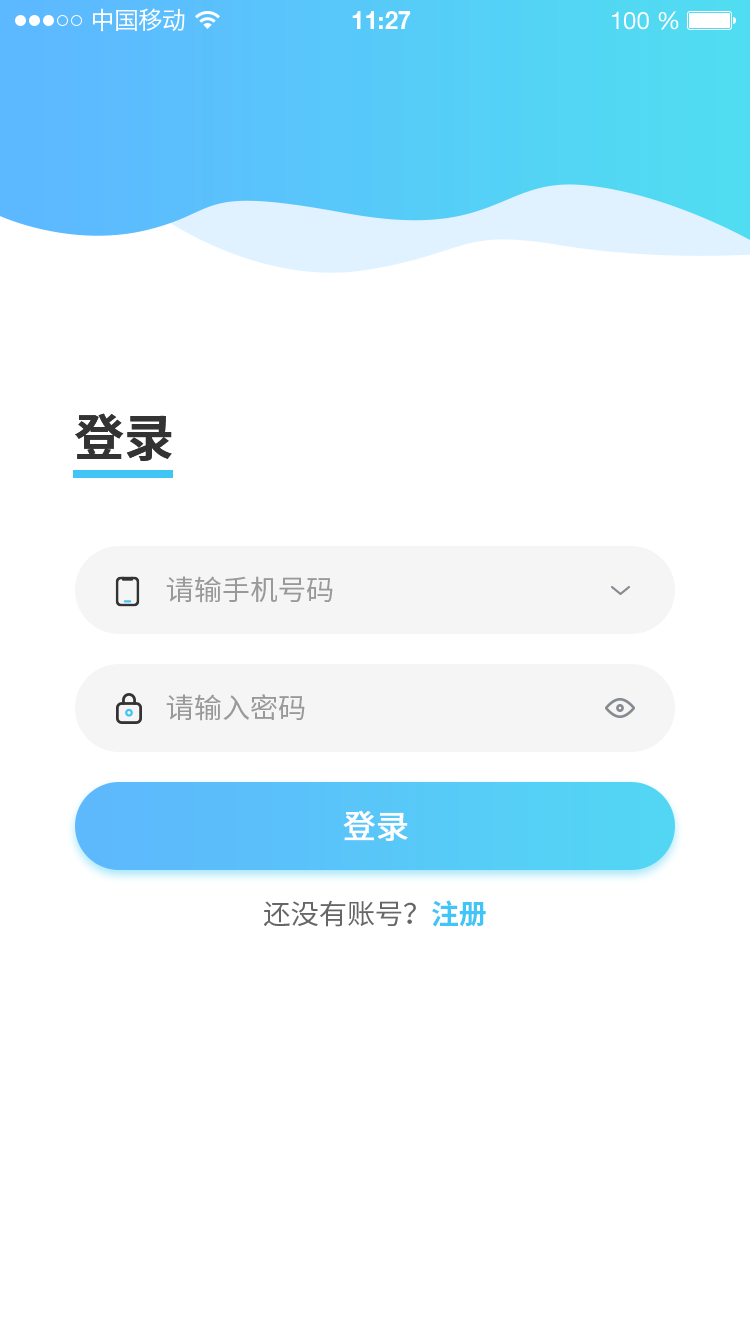
<style>
.page{position:relative;width:750px;height:1334px;background:#ffffff}
.page>*{position:absolute;margin:0}
.t1{font:50px "SourceHanSansCN-Bold";color:#333333;text-transform:uppercase}
.t2{font:28px "SourceHanSansCN-Regular";color:#999999}
.t3{font:32px "SourceHanSansCN-Regular";color:#ffffff;font-weight:bold}
.t4{font:28px "SourceHanSansCN-Regular";color:#666666}
.t5{font:28px "SourceHanSansCN-Bold";color:#41c5f6}
</style>
<div class="page">
<p class="t1" style="left:75px;top:413px;width:97px;height:48px">登录</p>
<p class="t2" style="left:166px;top:576px;width:167px;height:27px">请输手机号码</p>
<p class="t2" style="left:166px;top:694px;width:139px;height:27px">请输入密码</p>
<p class="t3" style="left:343px;top:810px;width:65px;height:31px">登录</p>
<p class="t4" style="left:263px;top:900px;width:223px;height:27px">还没有账号？<span class="t5">注册</span></p>
</div>
